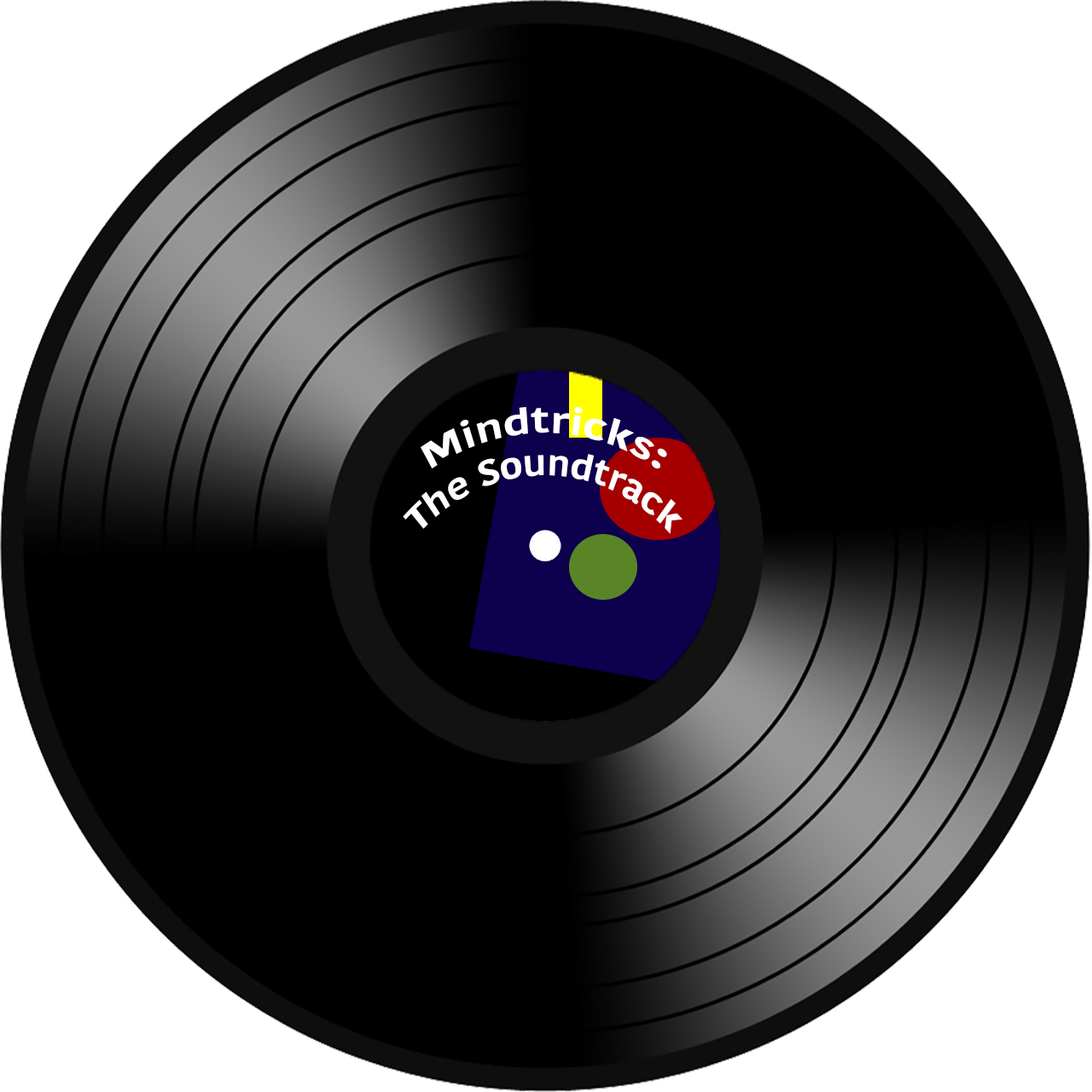
<style>
.page{position:relative;width:1092px;height:1092px;background:#000000}
.page>*{position:absolute;margin:0}
.t1{font:35.3px "KohinoorDevanagari-Bold";color:#ffffff;scale:0.88 1}
</style>
<div class="page">
<p class="t1" style="left:403px;top:407px;width:279px;height:127px;text-align:center">Mindtricks:<br>The Soundtrack</p>
</div>
